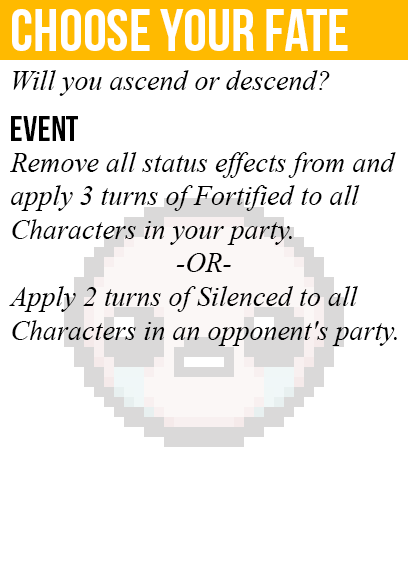
<style>
.page{position:relative;width:408px;height:585px;background:#ffffff}
.page>*{position:absolute;margin:0}
.t1{font:60px "BebasNeue";color:#ffffff}
.t2{font:28px "TimesNewRomanPS-ItalicMT";color:#000000}
.t3{font:36px "BebasNeue";color:#000000}
</style>
<div class="page">
<p class="t1" style="left:12px;top:9px;width:336px;height:42px">choose your fate</p>
<p class="t2" style="left:13px;top:70px;width:317px;height:26px">Will you ascend or descend?</p>
<p class="t3" style="left:11px;top:116px;width:67px;height:25px">event</p>
<p class="t2" style="left:9px;top:152px;width:388px;height:194px">Remove all status effects from and<br>apply 3 turns of Fortified to all<br>Characters in your party.<br><br>Apply 2 turns of Silenced to all<br>Characters in an opponent's party.</p>
<p class="t2" style="left:176px;top:253px;width:55px;height:19px">-OR-</p>
</div>
